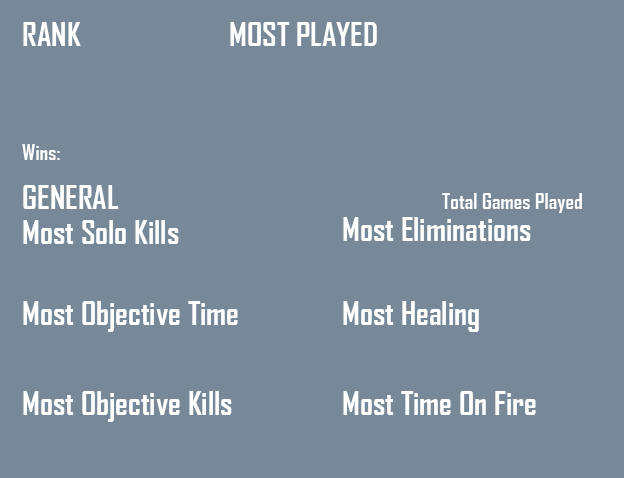
<style>
.page{position:relative;width:624px;height:478px;background:#778898}
.page>*{position:absolute;margin:0}
.t1{font:32px "AgencyFB-Bold";color:#feffff}
.t2{font:21.3px "AgencyFB-Bold";color:#feffff}
</style>
<div class="page">
<p class="t1" style="left:23px;top:22px;width:58px;height:24px">RANK</p>
<p class="t1" style="left:230px;top:22px;width:147px;height:24px">MOST PLAYED</p>
<p class="t2" style="left:22px;top:144px;width:38px;height:16px">Wins:</p>
<p class="t1" style="left:23px;top:185px;width:96px;height:24px">GENERAL</p>
<p class="t2" style="left:442px;top:193px;width:140px;height:20px">Total Games Played</p>
<p class="t1" style="left:23px;top:220px;width:156px;height:24px">Most Solo Kills</p>
<p class="t1" style="left:343px;top:217px;width:188px;height:24px">Most Eliminations</p>
<p class="t1" style="left:23px;top:301px;width:215px;height:31px">Most Objective Time</p>
<p class="t1" style="left:343px;top:301px;width:136px;height:31px">Most Healing</p>
<p class="t1" style="left:23px;top:391px;width:209px;height:31px">Most Objective Kills</p>
<p class="t1" style="left:343px;top:391px;width:193px;height:24px">Most Time On Fire</p>
</div>
